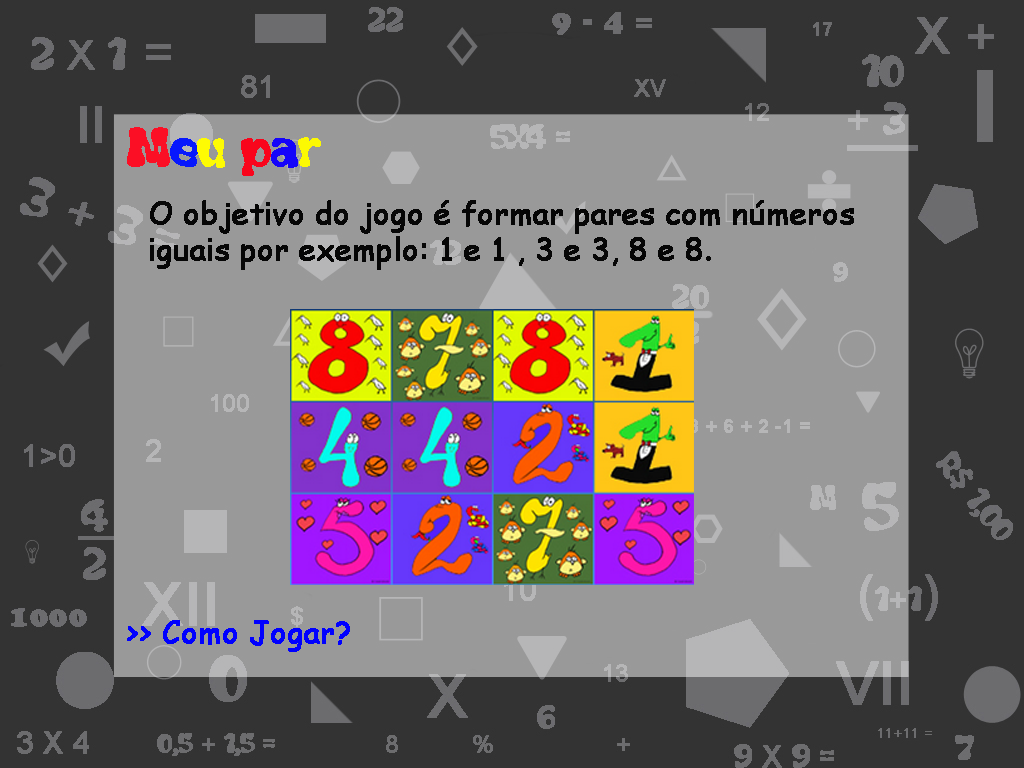
<style>
.page{position:relative;width:1024px;height:768px;background:#333333}
.page>*{position:absolute;margin:0}
.t1{font:48px "Flubber";color:#fb0f25;font-weight:bold}
.t2{font:48px "Flubber";color:#0718fd;font-weight:bold}
.t3{font:48px "Flubber";color:#fefb03;font-weight:bold}
.t4{font:48px "Flubber";color:#f9051c;font-weight:bold}
.t5{font:48px "Flubber";color:#1504fa;font-weight:bold}
.t6{font:48px "Flubber";color:#fcf903;font-weight:bold}
.t7{font:30px "ComicSansMS";color:#060606;font-weight:bold}
.t8{font:30px "ComicSansMS";color:#0000ff;font-weight:bold}
</style>
<div class="page">
<p class="t1" style="left:127px;top:127px;width:194px;height:49px">M<span class="t2">e</span><span class="t3">u </span><span class="t4">p</span><span class="t5">a</span><span class="t6">r</span></p>
<p class="t7" style="left:150px;top:200px;width:704px;height:70px">O objetivo do jogo é formar pares com números <br>iguais por exemplo: 1 e 1 , 3 e 3, 8 e 8.</p>
<p class="t8" style="left:127px;top:620px;width:223px;height:32px">&gt;&gt; Como Jogar?</p>
</div>
